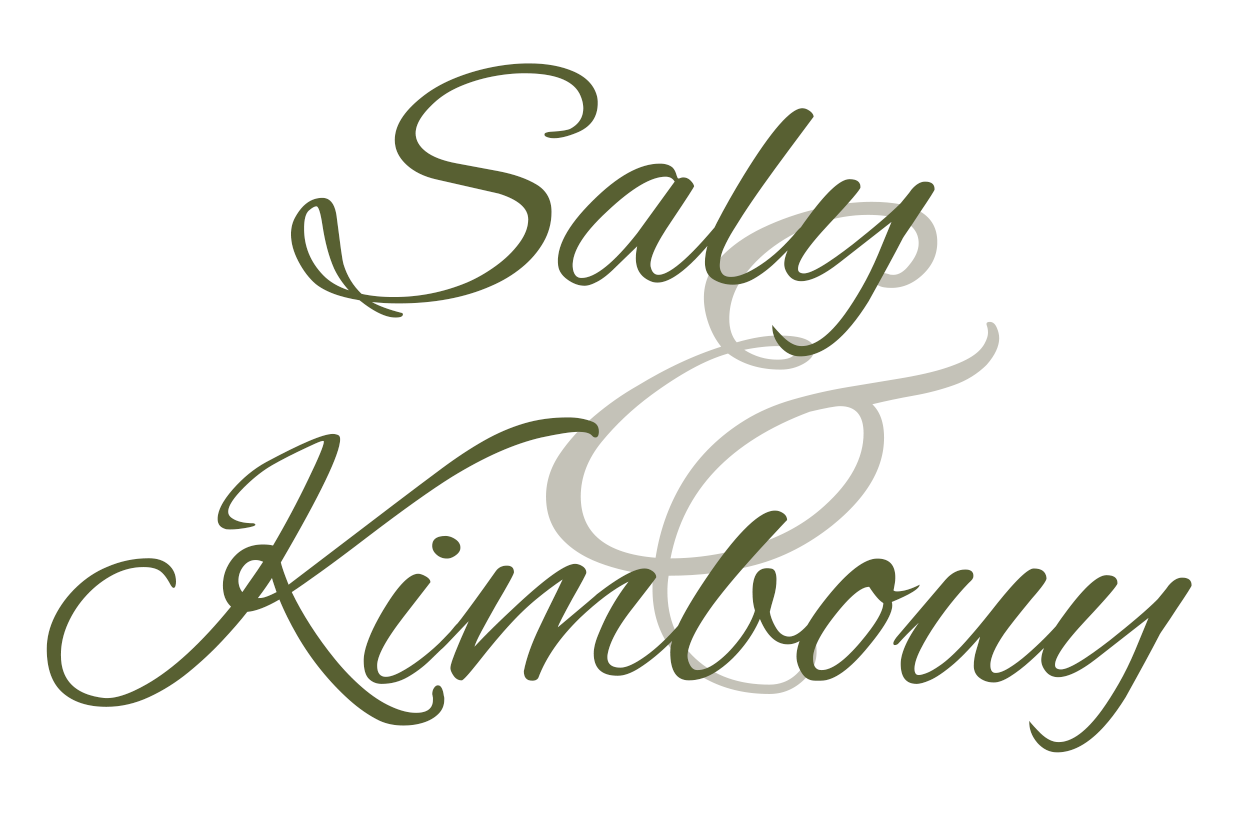
<style>
.page{position:relative;width:1238px;height:816px;background:#ffffff}
.page>*{position:absolute;margin:0}
.t1{font:352.9px "AlexBrush-Regular";color:#586032}
</style>
<div class="page">
<p class="t1" style="left:291px;top:63px;width:644px;height:294px">Saly</p>
<p class="t1" style="left:46px;top:417px;width:1146px;height:336px">Kimbouy</p>
</div>
